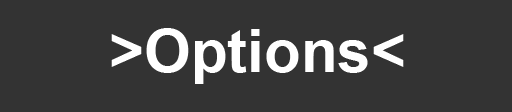
<style>
.page{position:relative;width:512px;height:112px;background:#333333}
.page>*{position:absolute;margin:0}
.t1{font:60px "Arial-BoldMT";color:#ffffff}
</style>
<div class="page">
<p class="t1" style="left:111px;top:28px;width:293px;height:56px">&gt;Options&lt;</p>
</div>
